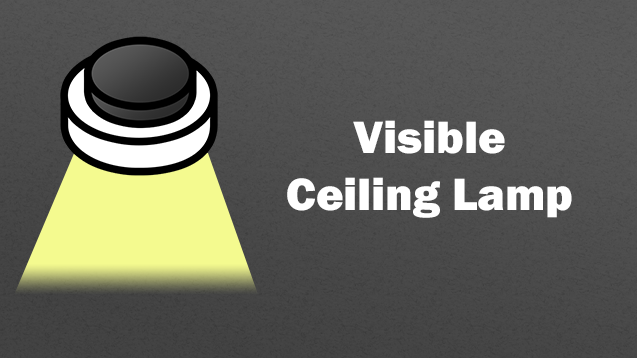
<style>
.page{position:relative;width:637px;height:358px}
.page>*{position:absolute;margin:0}
.t1{font:47px "FranklinGothic-Heavy";color:#ffffff}
</style>
<div class="page">
<p class="t1" style="left:287px;top:120px;width:285px;height:98px;text-align:center">Visible<br>Ceiling Lamp</p>
</div>
